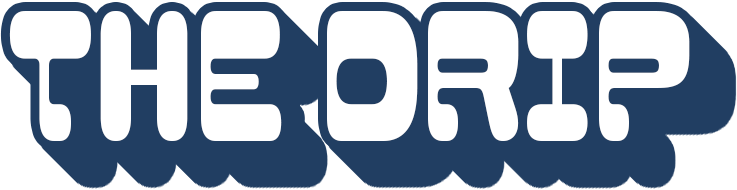
<style>
.page{position:relative;width:737px;height:190px;background:#ffffff}
.page>*{position:absolute;margin:0}
.t1{font:216.3px "CaplesDemo-Regular";color:#ffffff;scale:0.64 1}
</style>
<div class="page">
<p class="t1" style="left:9px;top:11px;width:681px;height:130px">THE DRIP</p>
</div>
